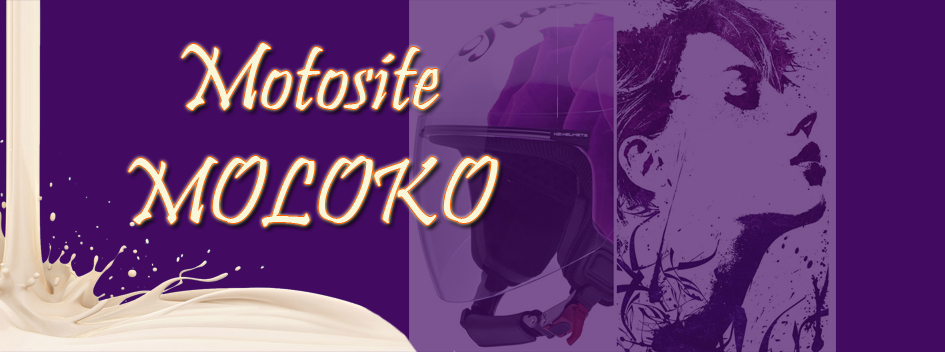
<style>
.page{position:relative;width:945px;height:352px;background:#420a61}
.page>*{position:absolute;margin:0}
.t1{font:95px "Pristina-Regular";color:#f8f7d9}
</style>
<div class="page">
<p class="t1" style="left:128px;top:43px;width:370px;height:184px;text-align:center">Motosite<br>MOLOKO</p>
</div>
